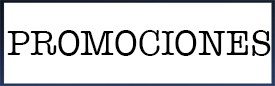
<style>
.page{position:relative;width:275px;height:86px;background:#ffffff}
.page>*{position:absolute;margin:0}
.t1{font:36px "AmericanTypewriter";color:#000000}
</style>
<div class="page">
<p class="t1" style="left:7px;top:30px;width:264px;height:26px">PROMOCIONES</p>
</div>
